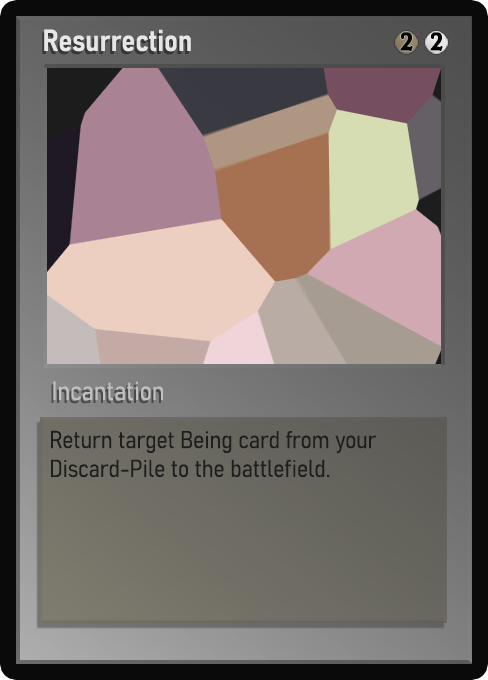
<style>
.page{position:relative;width:488px;height:680px}
.page>*{position:absolute;margin:0}
.t1{font:30px "Bahnschrift-SemiBoldSemiCondensed";color:#f2f2f2;font-weight:bold}
.t2{font:25px "WTRRoycroft";color:#000000;font-weight:bold;scale:1.09 1}
.t3{font:26px "Bahnschrift-LightSemiCondensed";color:#c8c8c8;font-weight:bold}
.t4{font:24px "Bahnschrift-LightSemiCondensed";color:#1e1e1e;font-weight:bold}
</style>
<div class="page">
<p class="t1" style="left:44px;top:29px;width:147px;height:23px;opacity:0.9">Resurrection</p>
<p class="t2" style="left:400px;top:32px;width:13px;height:19px">2</p>
<p class="t2" style="left:430px;top:32px;width:13px;height:19px">2</p>
<p class="t3" style="left:53px;top:381px;width:110px;height:20px;opacity:0.9">Incantation</p>
<p class="t4" style="left:51px;top:430px;width:326px;height:48px">Return target Being card from your Discard-Pile to the battlefield.</p>
</div>
